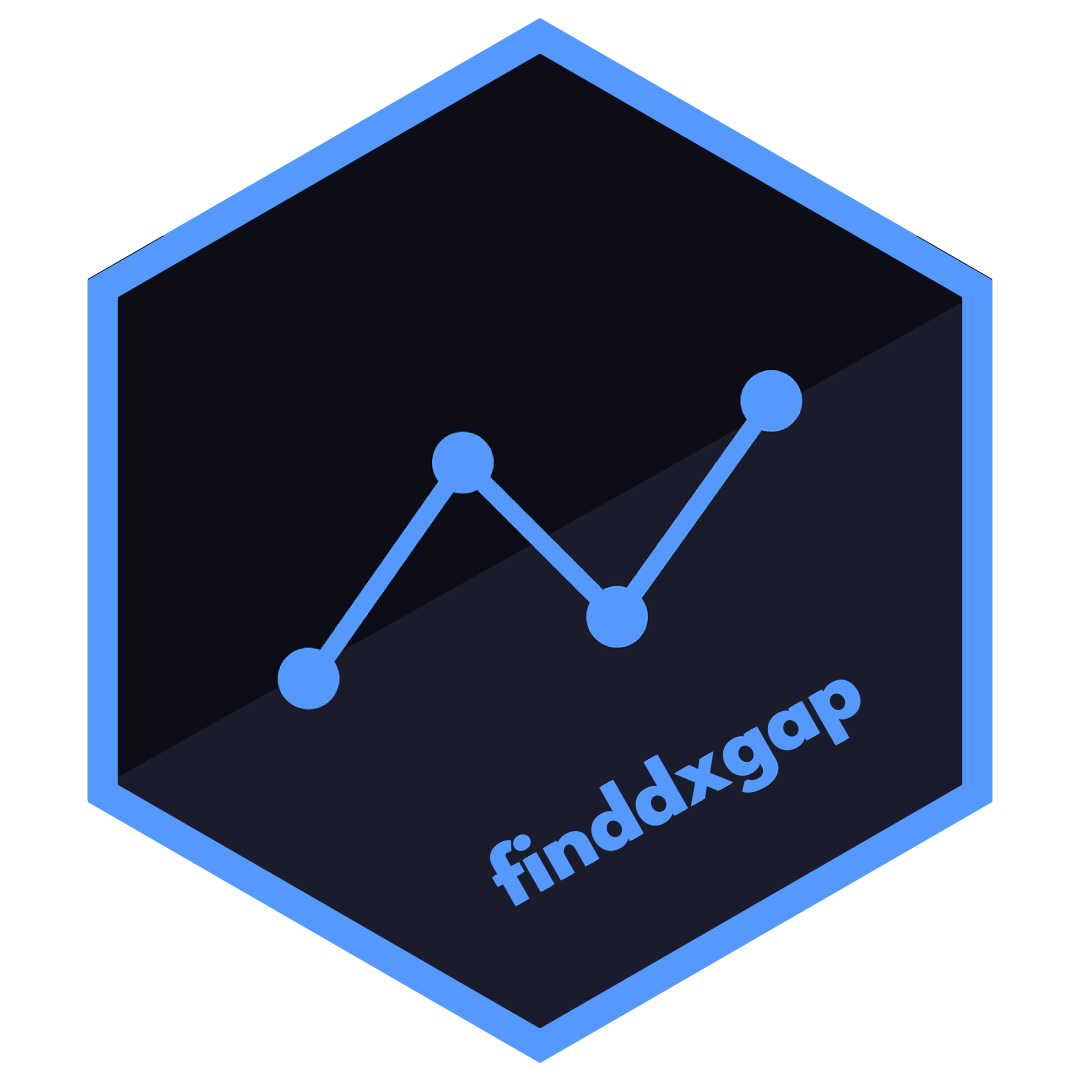
<style>
.page{position:relative;width:1080px;height:1080px;background:#ffffff}
.page>*{position:absolute;margin:0}
.t1{font:89.9px "LeagueSpartan-Bold";color:#5599ff;font-weight:bold}
</style>
<div class="page">
<p class="t1" style="left:490px;top:679px;width:371px;height:228px;rotate:-30deg">finddxgap</p>
</div>
